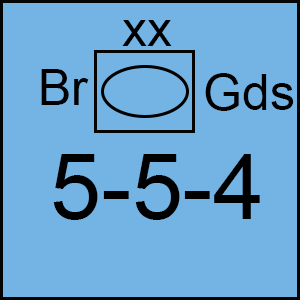
<style>
.page{position:relative;width:300px;height:300px;background:#74b4e4}
.page>*{position:absolute;margin:0}
.t1{font:50px "ArialMT";color:#000000}
.t2{font:91.7px "ArialMT";color:#000000}
</style>
<div class="page">
<p class="t1" style="left:122px;top:20px;width:50px;height:26px">xx</p>
<p class="t1" style="left:41px;top:69px;width:48px;height:36px">Br</p>
<p class="t1" style="left:205px;top:73px;width:89px;height:38px">Gds</p>
<p class="t2" style="left:53px;top:154px;width:207px;height:66px">5-5-4</p>
</div>
